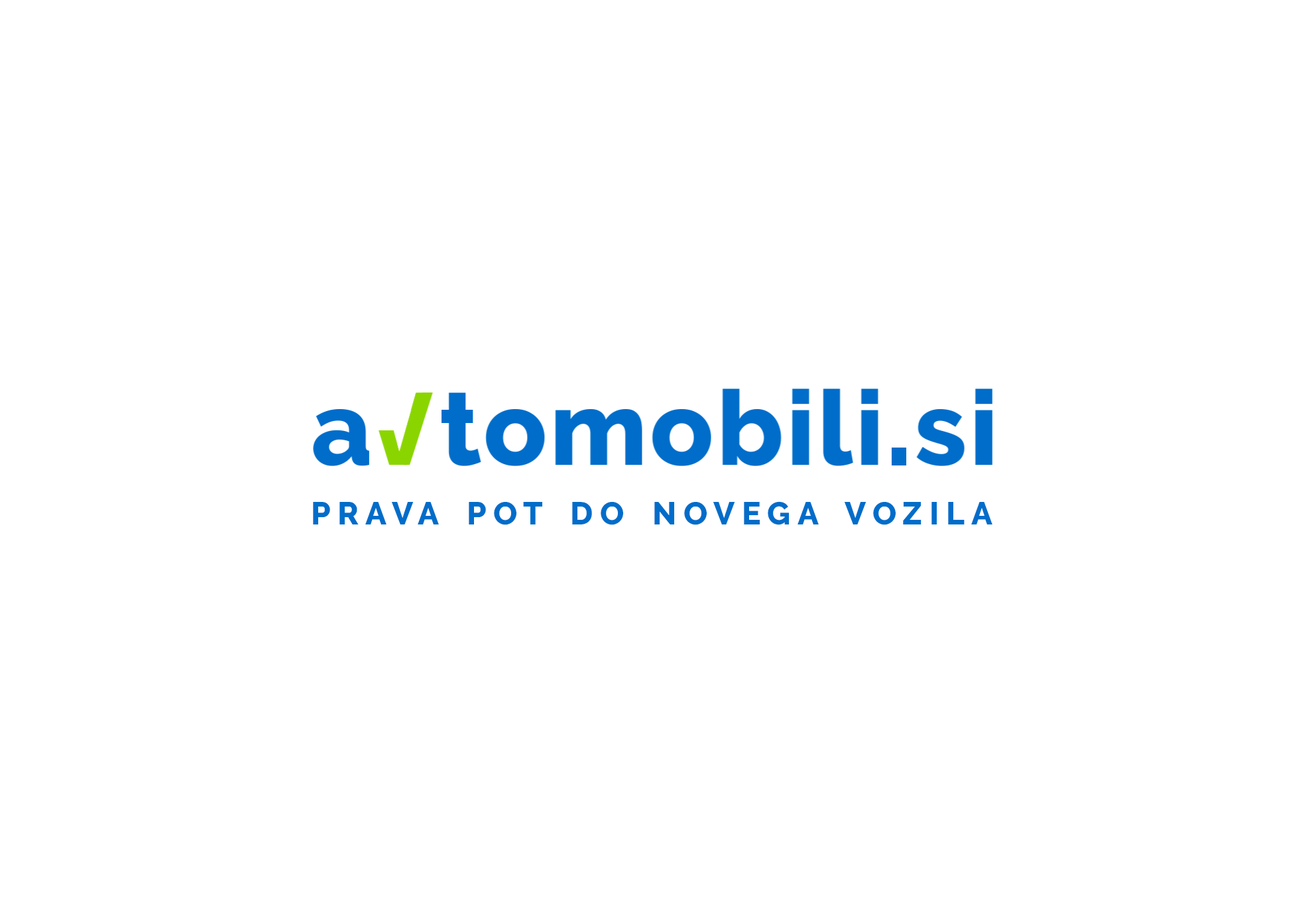
<style>
.page{position:relative;width:1306px;height:913px;background:#ffffff}
.page>*{position:absolute;margin:0}
.t1{font:31.6px "Raleway-ExtraBold";letter-spacing:0.22em;color:#006dca}
.t2{font:31.6px "Raleway-ExtraBold";letter-spacing:0.33em;color:#006dca}
.t3{font:31.6px "Raleway-ExtraBold";letter-spacing:0.52em;color:#006dca}
</style>
<div class="page">
<p class="t1" style="left:313px;top:501px;width:680px;height:24px">PRAV<span class="t2">A </span>PO<span class="t2">T </span>D<span class="t2">O </span>NOVEG<span class="t2">A </span>VOZIL<span class="t3">A</span></p>
</div>
